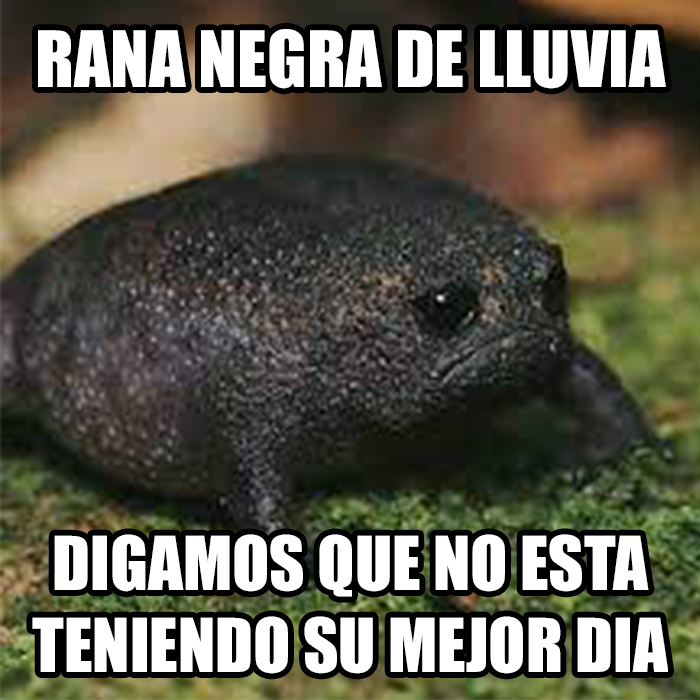
<style>
.page{position:relative;width:700px;height:700px}
.page>*{position:absolute;margin:0}
.t1{font:71.8px "Impact";color:#ffffff}
.t2{font:68.7px "Impact";color:#ffffff}
</style>
<div class="page">
<p class="t1" style="left:38px;top:29px;width:628px;height:60px">RANA NEGRA DE LLUVIA</p>
<p class="t2" style="left:32px;top:534px;width:636px;height:140px;text-align:center">DIGAMOS QUE NO ESTA<br>TENIENDO SU MEJOR DIA</p>
</div>
